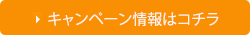
<style>
.page{position:relative;width:250px;height:35px;background:#f99003}
.page>*{position:absolute;margin:0}
.t1{font:15px "KozGoPr6N-Regular";color:#fef3eb}
</style>
<div class="page">
<p class="t1" style="left:48px;top:11px;width:171px;height:15px">キャンペーン情報はコチラ</p>
</div>
